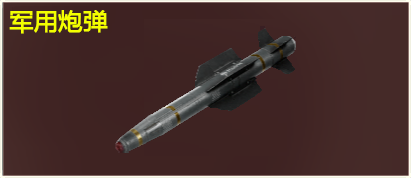
<style>
.page{position:relative;width:411px;height:178px}
.page>*{position:absolute;margin:0}
.t1{font:24px "MicrosoftYaHeiUI";color:#f4ff00;font-weight:bold}
</style>
<div class="page">
<p class="t1" style="left:9px;top:10px;width:99px;height:24px">军用炮弹</p>
</div>
